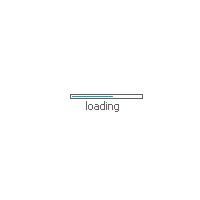
<style>
.page{position:relative;width:200px;height:200px;background:#ffffff}
.page>*{position:absolute;margin:0}
.t1{font:11px "Tahoma";color:#626262}
</style>
<div class="page">
<p class="t1" style="left:86px;top:101px;width:33px;height:11px">loading</p>
</div>
